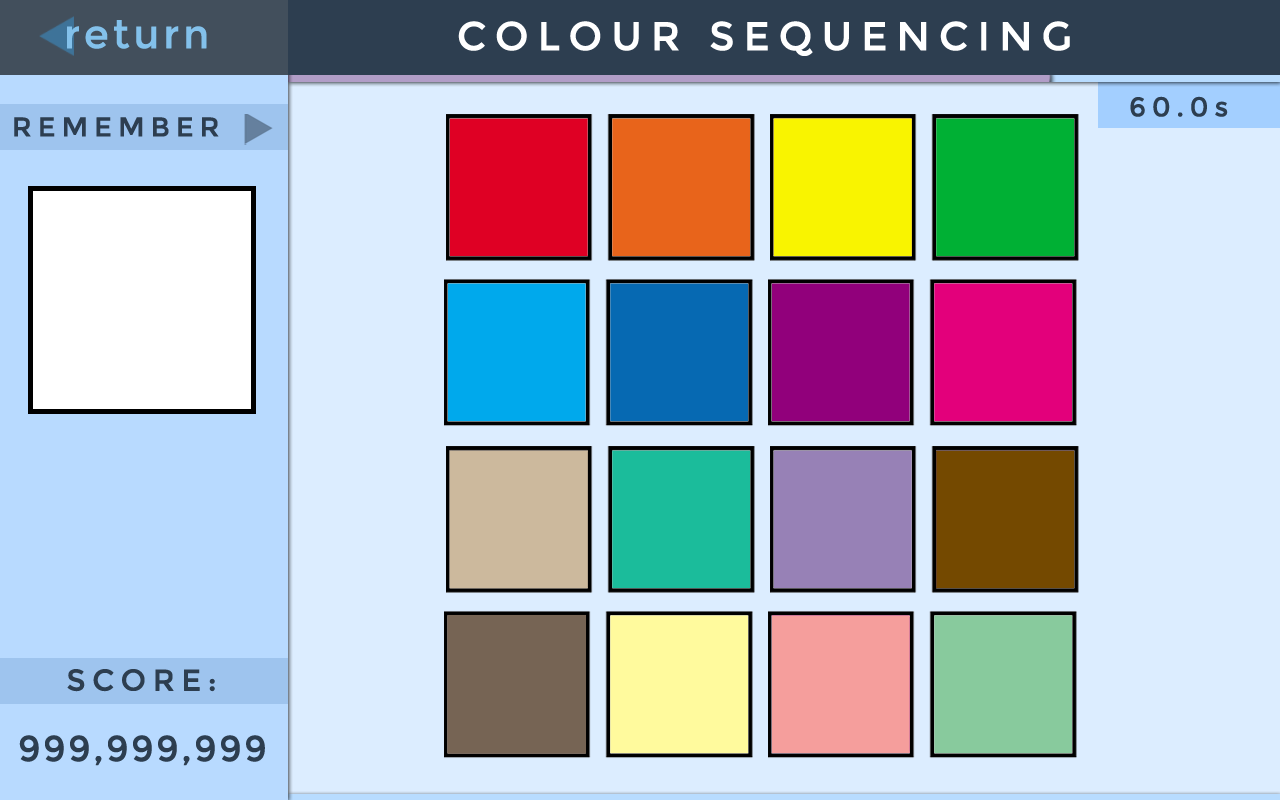
<style>
.page{position:relative;width:1280px;height:800px;background:#dcedff}
.page>*{position:absolute;margin:0}
.t1{font:40px "Montserrat-Regular";letter-spacing:0.075em;color:#83c1eb;font-weight:bold}
.t2{font:40px "Montserrat-Regular";letter-spacing:0.2em;color:#ffffff;text-transform:uppercase;font-weight:bold}
.t3{font:27px "Montserrat-Regular";letter-spacing:0.2em;color:#2d3e50;text-transform:uppercase;font-weight:bold}
.t4{font:27px "Montserrat-Regular";letter-spacing:0.2em;color:#2d3e50;font-weight:bold}
.t5{font:30px "Montserrat-Regular";letter-spacing:0.2em;color:#2d3e50;font-weight:bold}
.t6{font:36px "Montserrat-Regular";letter-spacing:0.05em;color:#2d3e50;font-weight:bold}
</style>
<div class="page">
<p class="t1" style="left:67px;top:20px;width:140px;height:29px">return</p>
<p class="t2" style="left:458px;top:21px;width:612px;height:35px">Colour Sequencing</p>
<p class="t3" style="left:1130px;top:96px;width:98px;height:21px">60.0<span class="t4">s</span></p>
<p class="t3" style="left:14px;top:117px;width:205px;height:20px">Remember</p>
<p class="t5" style="left:67px;top:669px;width:148px;height:23px">SCORE:</p>
<p class="t6" style="left:19px;top:735px;width:246px;height:31px">999,999,999</p>
</div>
